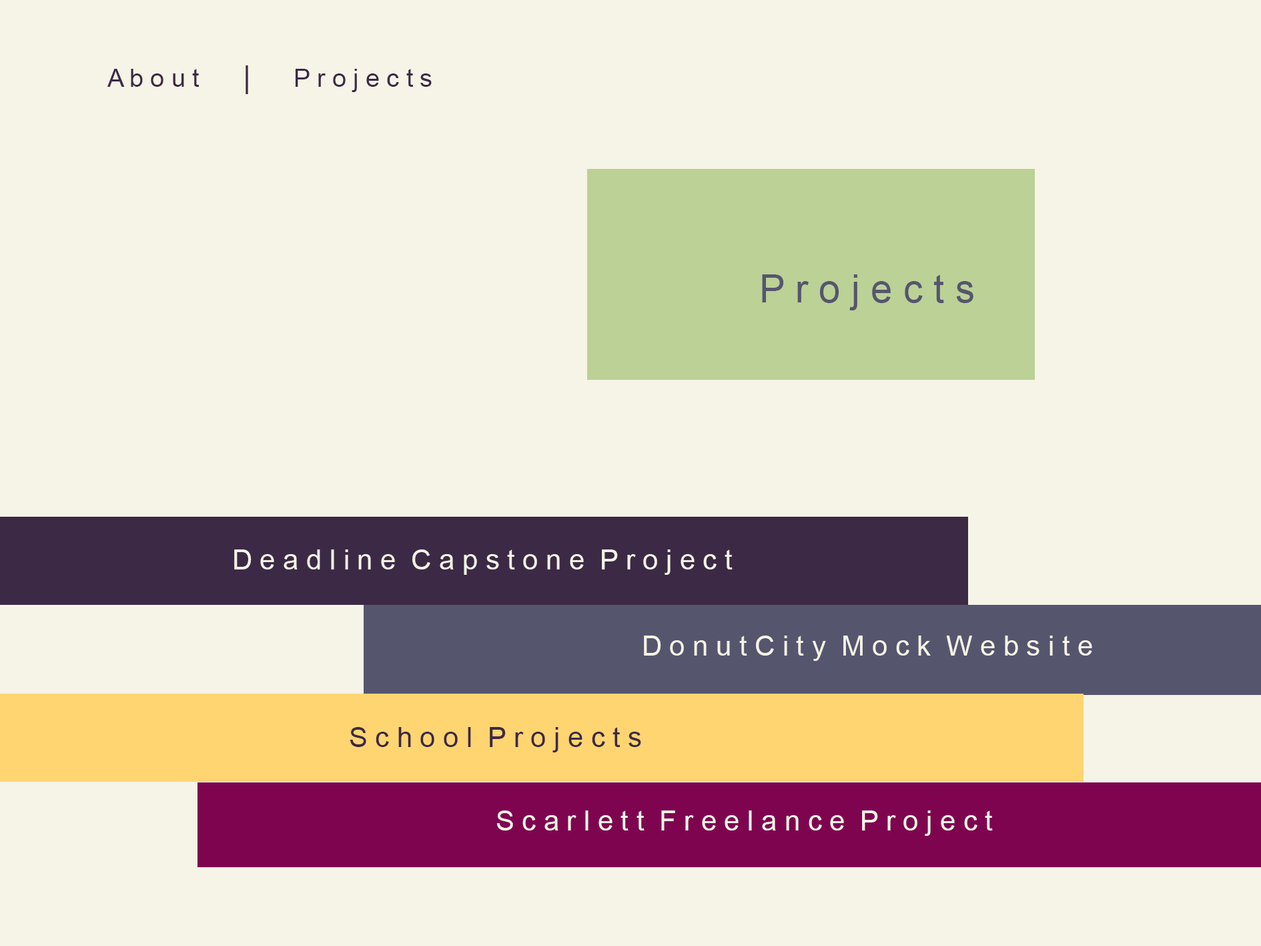
<style>
.page{position:relative;width:1261px;height:946px;background:#f6f4e6}
.page>*{position:absolute;margin:0}
.t1{font:30.6px "ArialMT";color:#3c2946}
.t2{font:25px "ArialMT";color:#3c2946}
.t3{font:38.9px "ArialMT";color:#56556e}
.t4{font:27.8px "ArialMT";color:#f6f4e6}
.t5{font:27.8px "ArialMT";color:#3c2946}
</style>
<div class="page">
<p class="t1" style="left:246px;top:65px;width:2px;height:29px">|</p>
<p class="t2" style="left:107px;top:69px;width:93px;height:18px">A b o u t</p>
<p class="t2" style="left:296px;top:69px;width:136px;height:23px">P r o j e c t s</p>
<p class="t3" style="left:762px;top:274px;width:212px;height:36px">P r o j e c t s</p>
<p class="t4" style="left:234px;top:549px;width:499px;height:26px">D e a d l i n e  C a p s t o n e  P r o j e c t</p>
<p class="t4" style="left:644px;top:635px;width:448px;height:26px">D o n u t C i t y  M o c k  W e b s i t e</p>
<p class="t5" style="left:350px;top:727px;width:291px;height:25px">S c h o o l  P r o j e c t s</p>
<p class="t4" style="left:496px;top:810px;width:497px;height:25px">S c a r l e t t  F r e e l a n c e  P r o j e c t</p>
</div>
